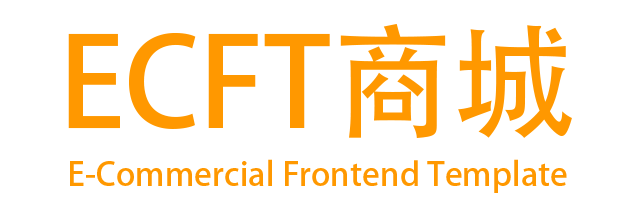
<style>
.page{position:relative;width:635px;height:205px;background:#ffffff}
.page>*{position:absolute;margin:0}
.t1{font:122.9px "AdobeHeitiStd-Regular";color:#ff9800}
.t2{font:32.8px "AdobeHeitiStd-Regular";color:#ff9800}
</style>
<div class="page">
<p class="t1" style="left:68px;top:23px;width:504px;height:116px">ECFT商城</p>
<p class="t2" style="left:70px;top:159px;width:497px;height:34px">E-Commercial Frontend Template</p>
</div>
